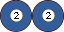
<style>
.page{position:relative;width:64px;height:32px;background:#345e9a}
.page>*{position:absolute;margin:0}
.t1{font:9.8px "CourierNewPS-BoldMT";letter-spacing:0.05em;color:#0a0a0a;scale:1.17 1}
</style>
<div class="page">
<p class="t1" style="left:14px;top:12px;width:5px;height:7px;rotate:60deg">2</p>
<p class="t1" style="left:46px;top:12px;width:5px;height:7px;rotate:60deg">2</p>
</div>
